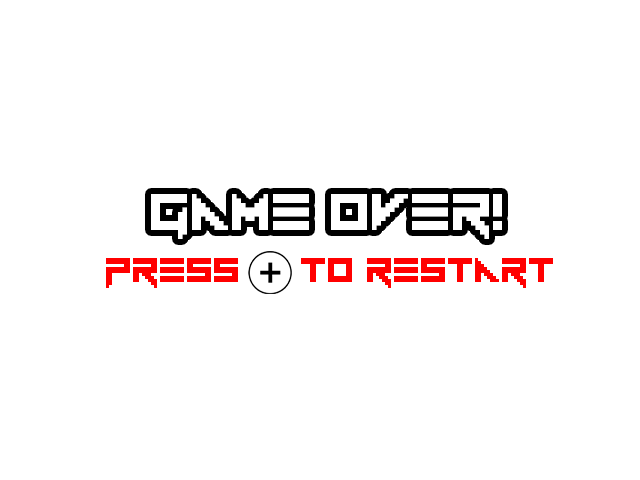
<style>
.page{position:relative;width:640px;height:480px;background:#ffffff}
.page>*{position:absolute;margin:0}
.t1{font:48px "Vermin-Vibes-1989";color:#ff0000}
</style>
<div class="page">
<p class="t1" style="left:106px;top:258px;width:447px;height:30px">press     to restart</p>
</div>
